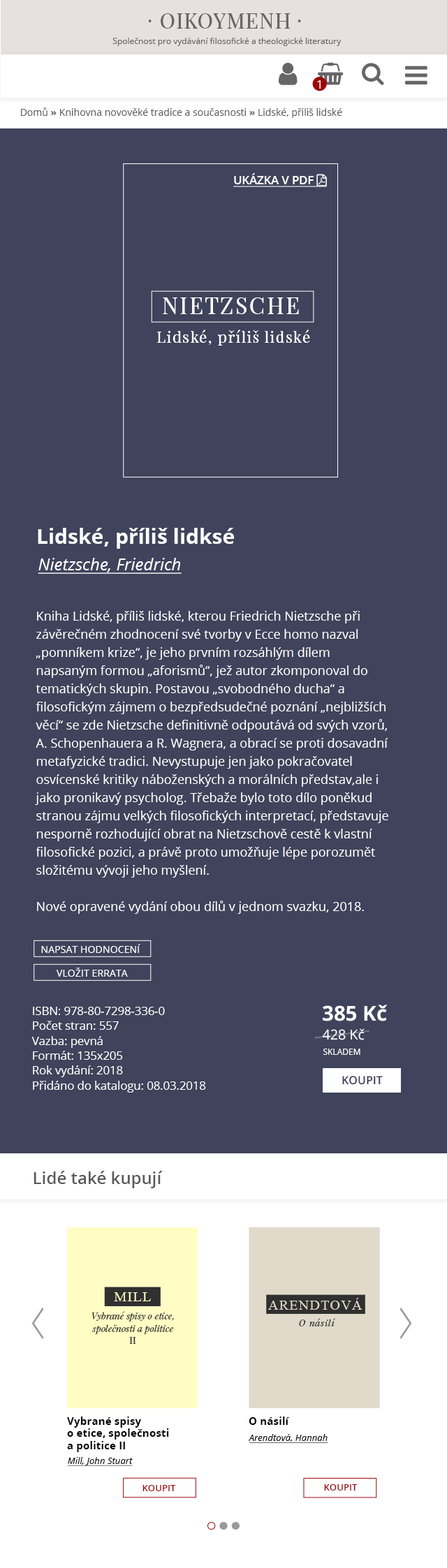
<style>
.page{position:relative;width:447px;height:1568px;background:#3f435b}
.page>*{position:absolute;margin:0}
.t1{font:20.9px "PlayfairDisplay-Regular";letter-spacing:0.04em;color:#666666}
.t2{font:20.9px "PlayfairDisplaySC-Regular";letter-spacing:0.04em;color:#666666}
.t3{font:8.4px "OpenSans";color:#666666}
.t4{font:12.1px "OpenSans";color:#ffffff}
.t5{font:9.8px "OpenSans";color:#616161}
.t6{font:9.8px "OpenSans-Bold";color:#616161}
.t7{font:22.7px "PlayfairDisplay-Regular";letter-spacing:0.075em;color:#ffffff;text-transform:uppercase}
.t8{font:15.1px "PlayfairDisplay-Regular";letter-spacing:0.075em;color:#ffffff}
.t9{font:20.9px "OpenSans-Bold";color:#ffffff}
.t10{font:16.8px "OpenSans-Italic";color:#ffffff;text-decoration:underline}
.t11{font:12.6px/18.2px "OpenSans";color:#ffffff}
.t12{font:9.9px "OpenSans";color:#ffffff;text-transform:uppercase}
.t13{font:11.6px/14.9px "OpenSans";color:#ffffff}
.t14{font:20.6px "OpenSans-Bold";color:#ffffff}
.t15{font:13.8px "OpenSans";color:#ffffff}
.t16{font:8.4px "OpenSans";color:#ffffff;text-transform:uppercase}
.t17{font:11.3px "OpenSans-Semibold";color:#3f435b;text-transform:uppercase}
.t18{font:16.8px "OpenSans-Semibold";color:#595959}
.t19{font:13.8px "TimesNewRomanPSMT";letter-spacing:0.075em;color:#fffcc4}
.t20{font:13.8px "TimesNewRomanPSMT";letter-spacing:0.075em;color:#e1dacb;text-transform:uppercase}
.t21{font:9.2px/12.3px "PlayfairDisplay-Italic";color:#303030}
.t22{font:9.2px/12.3px "PlayfairDisplay-Regular";color:#303030}
.t23{font:9.2px "PlayfairDisplay-Italic";letter-spacing:0.075em;color:#303030}
.t24{font:10.7px/12.3px "OpenSans-Bold";color:#000000}
.t25{font:10.7px "OpenSans-Bold";color:#000000}
.t26{font:9.2px "OpenSans-Italic";color:#000000;text-decoration:underline}
.t27{font:9.2px "OpenSans-Semibold";color:#9a080d;text-transform:uppercase}
</style>
<div class="page">
<p class="t1" style="left:161px;top:13px;width:129px;height:16px">OIKOYMENH</p>
<p class="t2" style="left:148px;top:20px;width:3px;height:2px">·</p>
<p class="t2" style="left:297px;top:20px;width:4px;height:2px">·</p>
<p class="t3" style="left:112px;top:38px;width:229px;height:8px">Společnost pro vydávání filosofické a theologické literatury</p>
<p class="t4" style="left:317px;top:80px;width:3px;height:9px">1</p>
<p class="t5" style="left:21px;top:108px;width:321px;height:10px">Domů <span class="t6">»</span> Knihovna novověké tradice a současnosti <span class="t6">»</span> Lidské, příliš lidské</p>
<p class="t7" style="left:163px;top:297px;width:136px;height:17px">Nietzsche</p>
<p class="t8" style="left:157px;top:330px;width:153px;height:16px">Lidské, příliš lidské</p>
<p class="t9" style="left:38px;top:528px;width:196px;height:21px">Lidské, příliš lidksé</p>
<p class="t10" style="left:38px;top:558px;width:144px;height:16px">Nietzsche, Friedrich</p>
<p class="t11" style="left:35px;top:611px;width:353px;height:303px">Kniha Lidské, příliš lidské, kterou Friedrich Nietzsche při závěrečném zhodnocení své tvorby v Ecce homo nazval „pomníkem krize“, je jeho prvním rozsáhlým dílem napsaným formou „aforismů“, jež autor zkomponoval do tematických skupin. Postavou „svobodného ducha“ a filosofickým zájmem o bezpředsudečné poznání „nejbližších věcí“ se zde Nietzsche definitivně odpoutává od svých vzorů, A. Schopenhauera a R. Wagnera, a obrací se proti dosavadní metafyzické tradici. Nevystupuje jen jako pokračovatel osvícenské kritiky náboženských a morálních představ,ale i jako pronikavý psycholog. Třebaže bylo toto dílo poněkud stranou zájmu velkých filosofických interpretací, představuje nesporně rozhodující obrat na Nietzschově cestě k vlastní filosofické pozici, a právě proto umožňuje lépe porozumět složitému vývoji jeho myšlení.<br> <br>Nové opravené vydání obou dílů v jednom svazku, 2018.</p>
<p class="t12" style="left:41px;top:944px;width:99px;height:9px">Napsat hodnocení</p>
<p class="t12" style="left:57px;top:968px;width:71px;height:9px">Vložit errata</p>
<p class="t13" style="left:31px;top:1007px;width:175px;height:86px">ISBN: 978-80-7298-336-0<br>Počet stran: 557<br>Vazba: pevná<br>Formát: 135x205<br>Rok vydání: 2018<br>Přidáno do katalogu: 08.03.2018</p>
<p class="t14" style="left:323px;top:1005px;width:64px;height:16px">385 Kč</p>
<p class="t15" style="left:322px;top:1028px;width:42px;height:12px">428 Kč</p>
<p class="t16" style="left:323px;top:1049px;width:37px;height:6px">skladem</p>
<p class="t17" style="left:342px;top:1076px;width:41px;height:9px">koupit</p>
<p class="t18" style="left:34px;top:1171px;width:129px;height:17px">Lidé také kupují</p>
<p class="t19" style="left:114px;top:1292px;width:37px;height:9px">MILL</p>
<p class="t20" style="left:268px;top:1298px;width:94px;height:12px">Arendtová</p>
<p class="t21" style="left:91px;top:1311px;width:83px;height:33px;text-align:center">Vybrané spisy o etice, společnosti a politice <br><span class="t22">II</span></p>
<p class="t23" style="left:299px;top:1318px;width:36px;height:8px">O násilí</p>
<p class="t24" style="left:67px;top:1417px;width:102px;height:35px">Vybrané spisy <br>o etice, společnosti <br>a politice II</p>
<p class="t25" style="left:249px;top:1417px;width:40px;height:8px">O násilí</p>
<p class="t26" style="left:249px;top:1434px;width:79px;height:9px">Arendtová, Hannah</p>
<p class="t26" style="left:67px;top:1457px;width:66px;height:9px">Mill, John Stuart</p>
<p class="t27" style="left:142px;top:1485px;width:34px;height:6px">koupit</p>
<p class="t27" style="left:324px;top:1484px;width:33px;height:7px">koupit</p>
</div>
